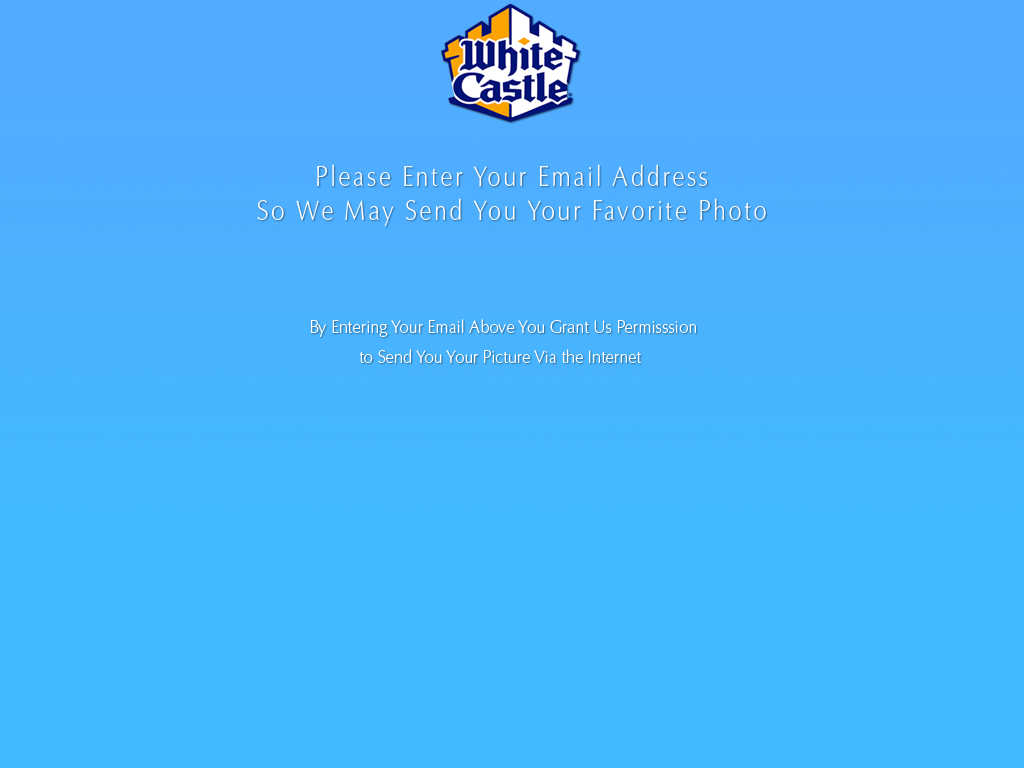
<style>
.page{position:relative;width:1024px;height:768px;background:#42b9ff}
.page>*{position:absolute;margin:0}
.t1{font:28px "OptimaEL-Text";letter-spacing:0.1em;color:#ffffff;scale:0.85 1}
.t2{font:18px "OptimaEL-Text";color:#ffffff;scale:0.91 1}
</style>
<div class="page">
<p class="t1" style="left:257px;top:164px;width:509px;height:63px;text-align:center">Please Enter Your Email Address<br>So We May Send You Your Favorite Photo</p>
<p class="t2" style="left:311px;top:319px;width:385px;height:44px;text-align:center">By Entering Your Email Above You Grant Us Permisssion<br>to Send You Your Picture Via the Internet</p>
</div>
